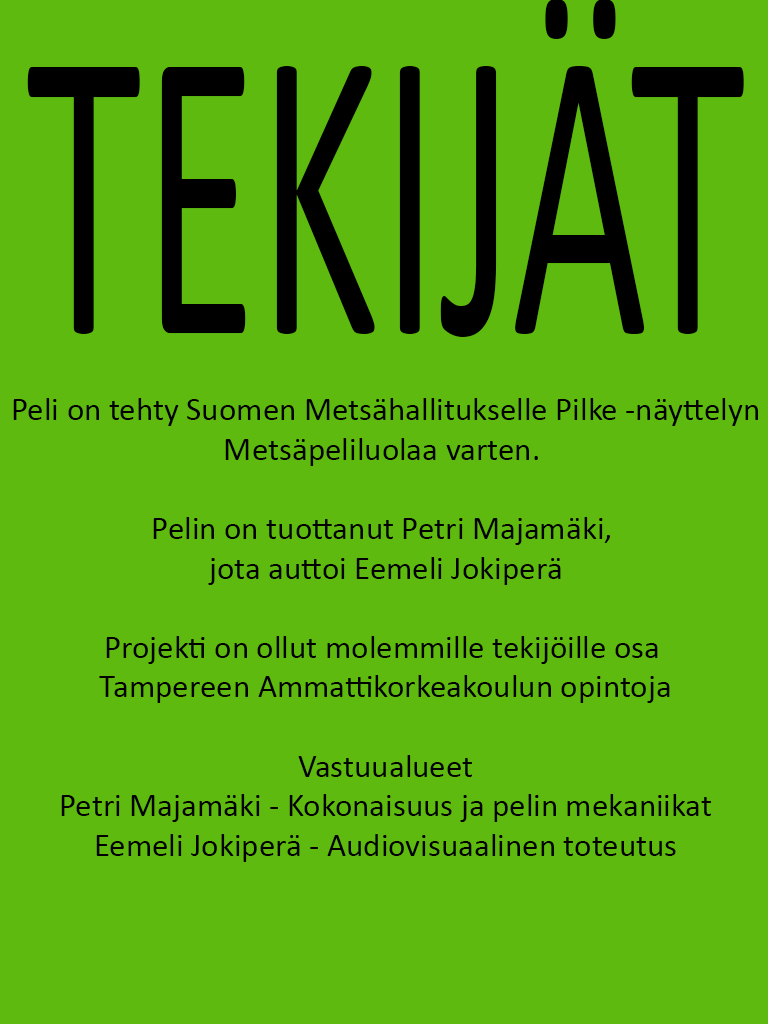
<style>
.page{position:relative;width:768px;height:1024px;background:#5eba0f}
.page>*{position:absolute;margin:0}
.t1{font:420.7px "Calibri";color:#000000;scale:0.56 1}
.t2{font:33px "Calibri";color:#000000}
</style>
<div class="page">
<p class="t1" style="left:27px;top:0px;width:717px;height:337px">TEKIJÄT</p>
<p class="t2" style="left:13px;top:398px;width:745px;height:464px;text-align:center">Peli on tehty Suomen Metsähallitukselle Pilke -näyttelyn<br>Metsäpeliluolaa varten. <br><br>Pelin on tuottanut Petri Majamäki, <br>jota auttoi Eemeli Jokiperä<br><br>Projekti on ollut molemmille tekijöille osa <br>Tampereen Ammattikorkeakoulun opintoja<br><br>Vastuualueet<br>Petri Majamäki - Kokonaisuus ja pelin mekaniikat<br>Eemeli Jokiperä - Audiovisuaalinen toteutus</p>
</div>
